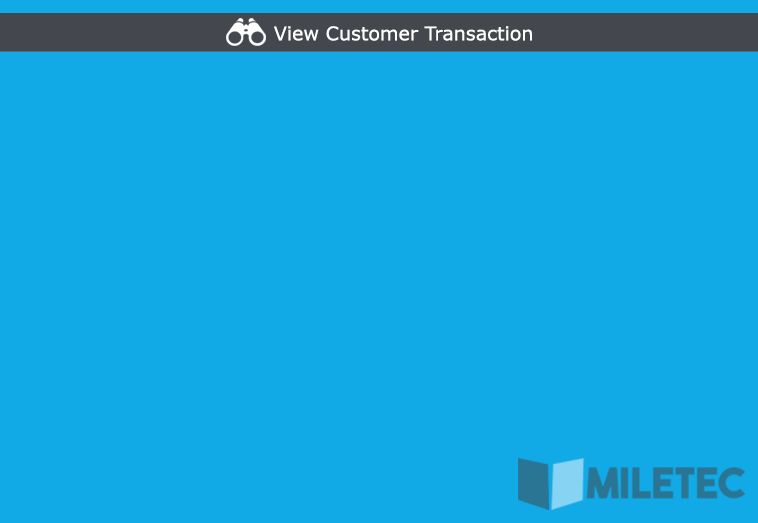
<style>
.page{position:relative;width:758px;height:523px;background:#12a9e7}
.page>*{position:absolute;margin:0}
.t1{font:18.9px "Verdana";color:#ffffff}
</style>
<div class="page">
<p class="t1" style="left:274px;top:26px;width:258px;height:15px">View Customer Transaction</p>
</div>
